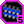
<style>
.page{position:relative;width:24px;height:24px}
.page>*{position:absolute;margin:0}
.t1{font:9px "Montserrat-Bold";color:#000000}
</style>
<div class="page">
<p class="t1" style="left:18px;top:16px;width:5px;height:7px">5</p>
</div>
